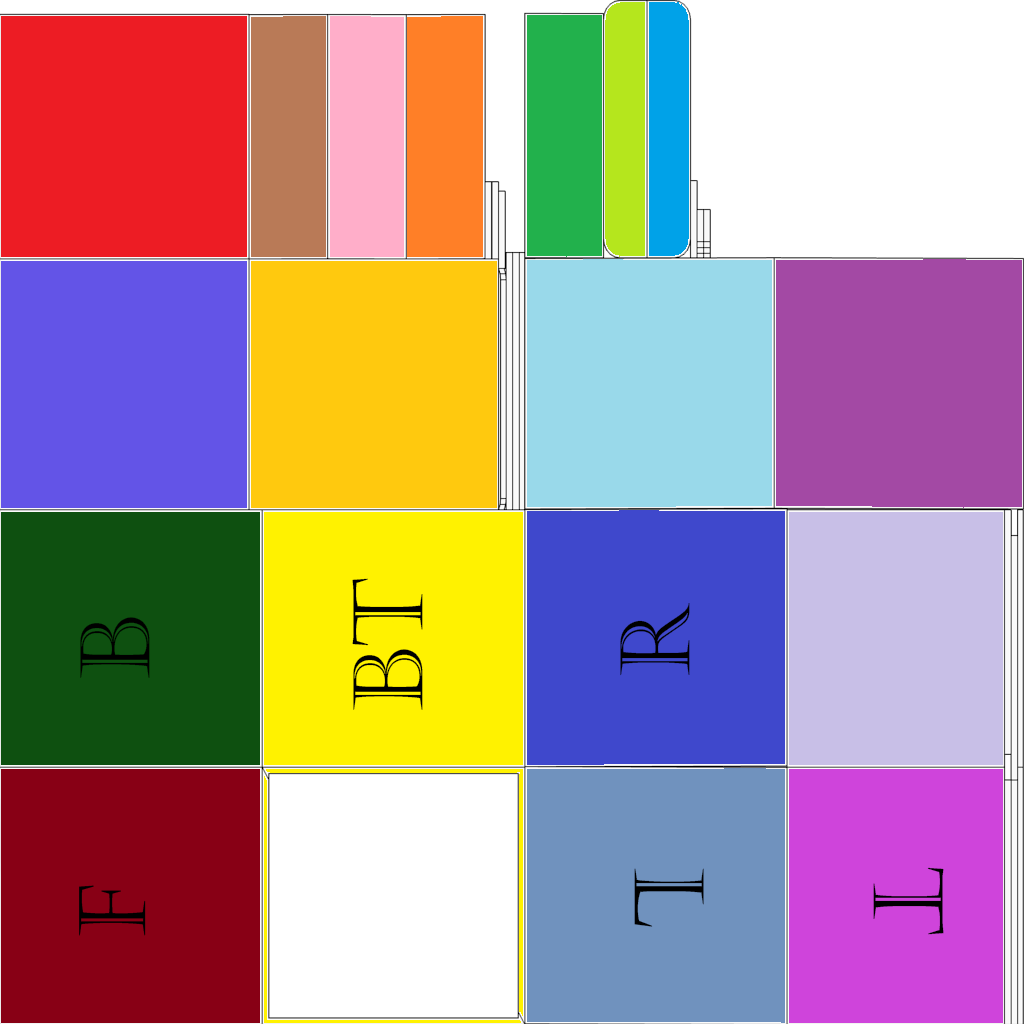
<style>
.page{position:relative;width:1024px;height:1024px}
.page>*{position:absolute;margin:0}
.t1{font:95.9px "Castellar";color:#000000}
</style>
<div class="page">
<p class="t1" style="left:352px;top:578px;width:71px;height:132px;rotate:-90deg">bt</p>
<p class="t1" style="left:620px;top:603px;width:70px;height:73px;rotate:-90deg">R</p>
<p class="t1" style="left:80px;top:617px;width:70px;height:61px;rotate:-90deg">b</p>
<p class="t1" style="left:634px;top:868px;width:70px;height:59px;rotate:90deg">L</p>
<p class="t1" style="left:873px;top:867px;width:71px;height:68px;rotate:90deg">t</p>
</div>
